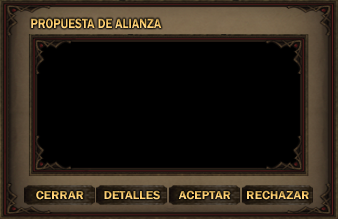
<style>
.page{position:relative;width:338px;height:219px;background:#000000}
.page>*{position:absolute;margin:0}
.t1{font:14px "FranklinGothic-Demi";scale:0.86 1}
.t2{font:12px "FranklinGothic-Demi";scale:1.07 1}
</style>
<div class="page">
<p class="t1" style="left:31px;top:18px;width:131px;height:11px">PROPUESTA DE ALIANZA</p>
<p class="t2" style="left:36px;top:190px;width:48px;height:10px">CERRAR</p>
<p class="t2" style="left:104px;top:190px;width:56px;height:10px">DETALLES</p>
<p class="t2" style="left:178px;top:190px;width:53px;height:10px">ACEPTAR</p>
<p class="t2" style="left:247px;top:190px;width:62px;height:10px">RECHAZAR</p>
</div>
